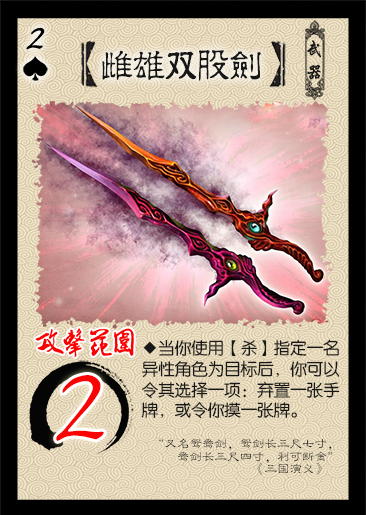
<style>
.page{position:relative;width:366px;height:515px}
.page>*{position:absolute;margin:0}
.t1{font:39.2px "Jxixinkai";letter-spacing:0.22em;color:#000000;font-weight:bold;font-style:italic}
.t2{font:35.5px "¾­µä·±½ÇÁ¥ Regular";letter-spacing:-0.1em;color:#161616}
.t3{font:35.5px "¾­µä·±½ÇÁ¥ Regular";letter-spacing:-0.1em;color:#161616;font-weight:bold}
.t4{font:16.7px/20.9px "FZY3JW--GB1-0";letter-spacing:-0.01em;color:#171717}
.t5{font:125.1px "Jxixinkai";letter-spacing:0.05em;color:#fa0303}
.t6{font:12.5px/12.5px "FZLBJW--GB1-0";color:#171717}
</style>
<div class="page">
<p class="t1" style="left:26px;top:27px;width:19px;height:23px">2</p>
<p class="t2" style="left:102px;top:50px;width:159px;height:31px">雌雄<span class="t3">双</span>股剑</p>
<p class="t4" style="left:141px;top:339px;width:199px;height:80px">◆当你使用【杀】指定一名<br>异性角色为目标后，你可以<br>令其选择一项：弃置一张手<br>牌，或令你摸一张牌。</p>
<p class="t5" style="left:56px;top:375px;width:48px;height:66px">2</p>
<p class="t6" style="left:159px;top:438px;width:174px;height:37px;text-align:right">“又名鸳鸯剑，鸳剑长三尺七寸，<br>鸯剑长三尺四寸，利可断金”<br>                                      《三国演义》</p>
</div>
